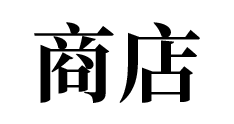
<style>
.page{position:relative;width:234px;height:124px;background:#ffffff}
.page>*{position:absolute;margin:0}
.t1{font:85.3px "NotoSerifSC-Bold";color:#000000}
</style>
<div class="page">
<p class="t1" style="left:34px;top:22px;width:166px;height:81px">商店</p>
</div>
